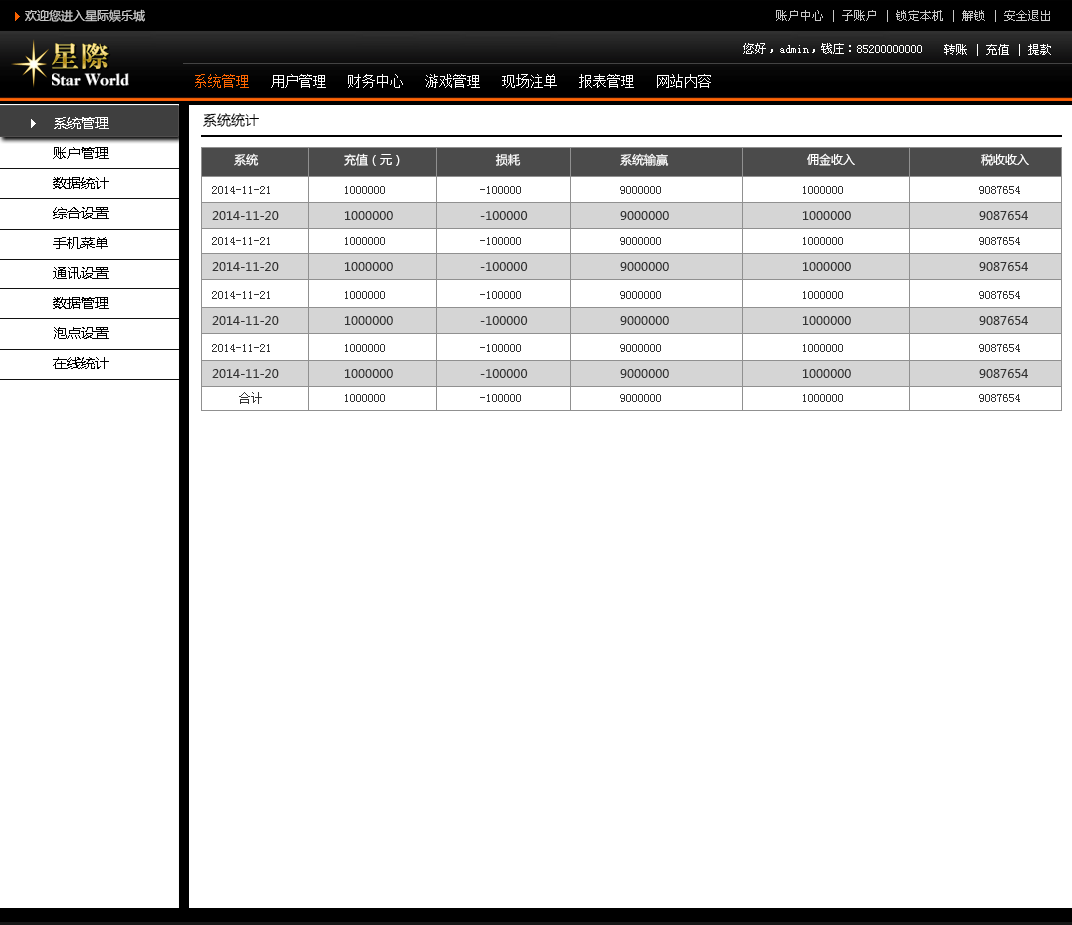
<style>
.page{position:relative;width:1072px;height:925px;background:#ffffff}
.page>*{position:absolute;margin:0}
.t1{font:12px "MicrosoftYaHei";color:#c8c8c8}
.t2{font:12px "SimSun";color:#c8c8c8}
.t3{font:28.7px "HYa4gf";letter-spacing:0.05em}
.t4{font:12px "SimSun";color:#ffffff}
.t5{font:12px "MicrosoftYaHei";color:#ffffff}
.t6{font:15.9px "CaslonOldFaceBT-Heavy";color:#ffffff}
.t7{font:14px "SimSun";color:#fefefe}
.t8{font:14px "SimSun";color:#ff6600}
.t9{font:14px "MicrosoftYaHei";color:#000000}
.t10{font:14px/30px "MicrosoftYaHei";color:#000000}
.t11{font:14px/30px "MicrosoftYaHei";color:#ffffff}
.t12{font:12px "SimSun";color:#333333}
.t13{font:12px "MicrosoftYaHei";color:#333333}
</style>
<div class="page">
<p class="t1" style="left:25px;top:9px;width:120px;height:13px">欢迎您进入星际娱乐城</p>
<p class="t2" style="left:776px;top:10px;width:274px;height:12px">账户中心 | 子账户 | 锁定本机 | 解锁 | 安全退出</p>
<p class="t3" style="left:52px;top:43px;width:57px;height:26px">星际</p>
<p class="t4" style="left:743px;top:43px;width:179px;height:11px">您好，admin，钱庄：85200000000</p>
<p class="t4" style="left:944px;top:44px;width:107px;height:12px"><span class="t5">    </span>转账 | 充值 | 提款</p>
<p class="t6" style="left:52px;top:73px;width:77px;height:13px">Star World</p>
<p class="t7" style="left:195px;top:74px;width:516px;height:14px"><span class="t8">系统管理 </span>  用户管理   财务中心   游戏管理   现场注单   报表管理   网站内容</p>
<p class="t9" style="left:203px;top:113px;width:56px;height:14px">系统统计</p>
<p class="t10" style="left:53px;top:117px;width:56px;height:252px"><span class="t11">系统管理<br></span>账户管理<br>数据统计<br>综合设置<br>手机菜单<br>通讯设置<br>数据管理<br>泡点设置<br>在线统计</p>
<p class="t5" style="left:234px;top:153px;width:25px;height:13px">系统</p>
<p class="t5" style="left:344px;top:153px;width:56px;height:13px">充值（元）</p>
<p class="t5" style="left:495px;top:153px;width:26px;height:13px">损耗</p>
<p class="t5" style="left:620px;top:153px;width:49px;height:13px">系统输赢</p>
<p class="t5" style="left:807px;top:153px;width:48px;height:13px">佣金收入</p>
<p class="t5" style="left:981px;top:154px;width:48px;height:12px">税收收入</p>
<p class="t12" style="left:212px;top:186px;width:58px;height:8px">2014-11-21</p>
<p class="t12" style="left:345px;top:186px;width:40px;height:8px">1000000</p>
<p class="t12" style="left:480px;top:186px;width:41px;height:8px">-100000</p>
<p class="t12" style="left:620px;top:186px;width:41px;height:8px">9000000</p>
<p class="t12" style="left:803px;top:186px;width:40px;height:8px">1000000</p>
<p class="t12" style="left:979px;top:186px;width:41px;height:8px">9087654</p>
<p class="t13" style="left:212px;top:211px;width:67px;height:9px">2014-11-20</p>
<p class="t13" style="left:344px;top:211px;width:49px;height:9px">1000000</p>
<p class="t13" style="left:480px;top:211px;width:48px;height:9px">-100000</p>
<p class="t13" style="left:620px;top:211px;width:49px;height:9px">9000000</p>
<p class="t13" style="left:802px;top:211px;width:49px;height:9px">1000000</p>
<p class="t13" style="left:979px;top:211px;width:49px;height:9px">9087654</p>
<p class="t12" style="left:212px;top:237px;width:58px;height:8px">2014-11-21</p>
<p class="t12" style="left:345px;top:237px;width:40px;height:8px">1000000</p>
<p class="t12" style="left:480px;top:237px;width:41px;height:8px">-100000</p>
<p class="t12" style="left:620px;top:237px;width:41px;height:8px">9000000</p>
<p class="t12" style="left:803px;top:237px;width:40px;height:8px">1000000</p>
<p class="t12" style="left:979px;top:237px;width:41px;height:8px">9087654</p>
<p class="t13" style="left:212px;top:262px;width:67px;height:9px">2014-11-20</p>
<p class="t13" style="left:344px;top:262px;width:49px;height:9px">1000000</p>
<p class="t13" style="left:480px;top:262px;width:48px;height:9px">-100000</p>
<p class="t13" style="left:620px;top:262px;width:49px;height:9px">9000000</p>
<p class="t13" style="left:802px;top:262px;width:49px;height:9px">1000000</p>
<p class="t13" style="left:979px;top:262px;width:49px;height:9px">9087654</p>
<p class="t12" style="left:212px;top:291px;width:58px;height:8px">2014-11-21</p>
<p class="t12" style="left:345px;top:291px;width:40px;height:8px">1000000</p>
<p class="t12" style="left:480px;top:291px;width:41px;height:8px">-100000</p>
<p class="t12" style="left:620px;top:291px;width:41px;height:8px">9000000</p>
<p class="t12" style="left:803px;top:291px;width:40px;height:8px">1000000</p>
<p class="t12" style="left:979px;top:291px;width:41px;height:8px">9087654</p>
<p class="t13" style="left:212px;top:316px;width:67px;height:9px">2014-11-20</p>
<p class="t13" style="left:344px;top:316px;width:49px;height:9px">1000000</p>
<p class="t13" style="left:480px;top:316px;width:48px;height:9px">-100000</p>
<p class="t13" style="left:620px;top:316px;width:49px;height:9px">9000000</p>
<p class="t13" style="left:802px;top:316px;width:49px;height:9px">1000000</p>
<p class="t13" style="left:979px;top:316px;width:49px;height:9px">9087654</p>
<p class="t12" style="left:212px;top:344px;width:58px;height:8px">2014-11-21</p>
<p class="t12" style="left:345px;top:344px;width:40px;height:8px">1000000</p>
<p class="t12" style="left:480px;top:344px;width:41px;height:8px">-100000</p>
<p class="t12" style="left:620px;top:344px;width:41px;height:8px">9000000</p>
<p class="t12" style="left:803px;top:344px;width:40px;height:8px">1000000</p>
<p class="t12" style="left:979px;top:344px;width:41px;height:8px">9087654</p>
<p class="t13" style="left:212px;top:369px;width:67px;height:9px">2014-11-20</p>
<p class="t13" style="left:344px;top:369px;width:49px;height:9px">1000000</p>
<p class="t13" style="left:480px;top:369px;width:48px;height:9px">-100000</p>
<p class="t13" style="left:620px;top:369px;width:49px;height:9px">9000000</p>
<p class="t13" style="left:802px;top:369px;width:49px;height:9px">1000000</p>
<p class="t13" style="left:979px;top:369px;width:49px;height:9px">9087654</p>
<p class="t12" style="left:239px;top:392px;width:23px;height:12px">合计</p>
<p class="t12" style="left:345px;top:394px;width:40px;height:8px">1000000</p>
<p class="t12" style="left:480px;top:394px;width:41px;height:8px">-100000</p>
<p class="t12" style="left:620px;top:394px;width:41px;height:8px">9000000</p>
<p class="t12" style="left:803px;top:394px;width:40px;height:8px">1000000</p>
<p class="t12" style="left:979px;top:394px;width:41px;height:8px">9087654</p>
</div>
